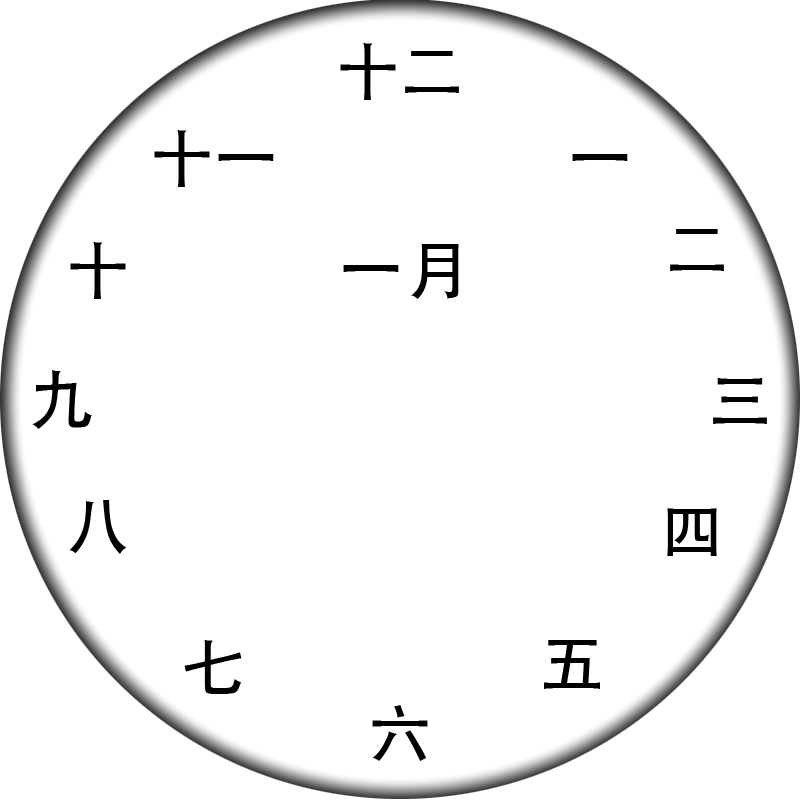
<style>
.page{position:relative;width:800px;height:800px;background:#ffffff}
.page>*{position:absolute;margin:0}
.t1{font:64px "STHeitiSC-Medium";color:#000000}
</style>
<div class="page">
<p class="t1" style="left:340px;top:43px;width:119px;height:57px">十二</p>
<p class="t1" style="left:154px;top:130px;width:120px;height:57px">十一</p>
<p class="t1" style="left:572px;top:154px;width:56px;height:7px">一</p>
<p class="t1" style="left:670px;top:229px;width:54px;height:42px">二</p>
<p class="t1" style="left:70px;top:242px;width:56px;height:57px">十</p>
<p class="t1" style="left:343px;top:244px;width:116px;height:55px">一月</p>
<p class="t1" style="left:32px;top:370px;width:60px;height:59px">九</p>
<p class="t1" style="left:713px;top:378px;width:54px;height:46px">三</p>
<p class="t1" style="left:69px;top:500px;width:58px;height:54px">八</p>
<p class="t1" style="left:667px;top:508px;width:50px;height:48px">四</p>
<p class="t1" style="left:184px;top:640px;width:58px;height:54px">七</p>
<p class="t1" style="left:544px;top:640px;width:56px;height:49px">五</p>
<p class="t1" style="left:372px;top:705px;width:56px;height:56px">六</p>
</div>
